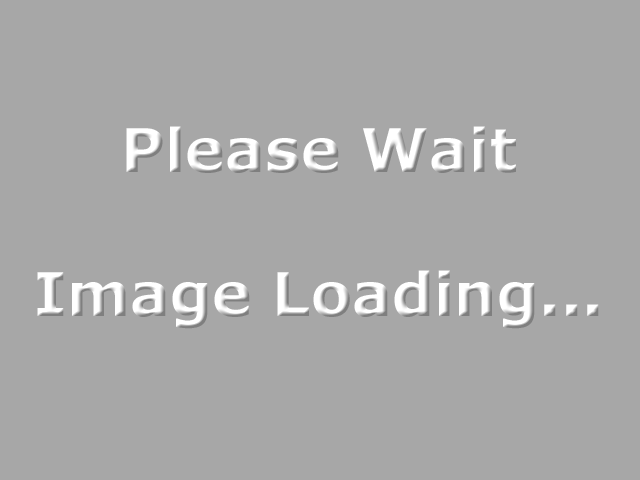
<style>
.page{position:relative;width:640px;height:480px;background:#a7a7a7}
.page>*{position:absolute;margin:0}
.t1{font:60px "Verdana-Bold";color:#ffffff}
</style>
<div class="page">
<p class="t1" style="left:37px;top:126px;width:562px;height:203px;text-align:center">Please Wait<br><br>Image Loading...</p>
</div>
